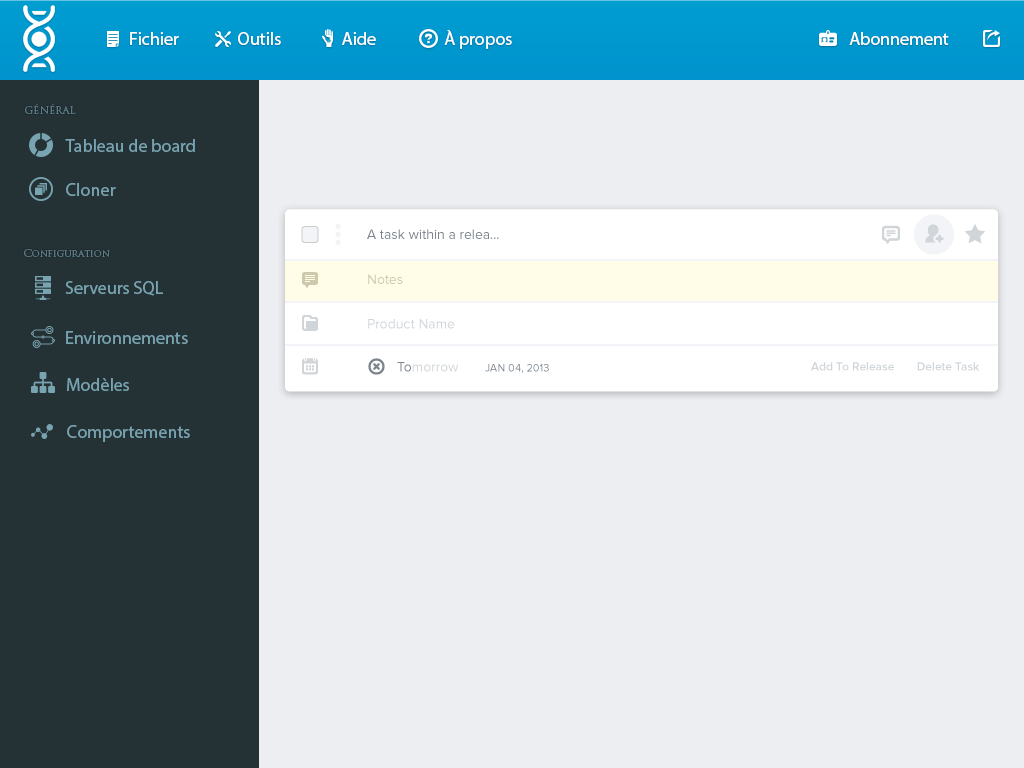
<style>
.page{position:relative;width:1024px;height:768px;background:#edeef1}
.page>*{position:absolute;margin:0}
.t1{font:18px "MyriadPro-Regular";color:#ffffff}
.t2{font:10px "TrajanPro-Regular";color:#5b7c86}
.t3{font:18px "MyriadPro-Regular";color:#78a3b0}
</style>
<div class="page">
<p class="t1" style="left:444px;top:30px;width:68px;height:19px">À propos</p>
<p class="t1" style="left:130px;top:32px;width:49px;height:13px">Fichier</p>
<p class="t1" style="left:238px;top:32px;width:43px;height:13px">Outils</p>
<p class="t1" style="left:342px;top:32px;width:34px;height:13px">Aide</p>
<p class="t1" style="left:849px;top:32px;width:100px;height:13px">Abonnement</p>
<p class="t2" style="left:25px;top:104px;width:51px;height:10px">GÉNÉRAL</p>
<p class="t3" style="left:65px;top:139px;width:130px;height:13px">Tableau de board</p>
<p class="t3" style="left:66px;top:183px;width:50px;height:13px">Cloner</p>
<p class="t2" style="left:24px;top:249px;width:86px;height:8px">Configuration</p>
<p class="t3" style="left:65px;top:281px;width:98px;height:15px">Serveurs SQL</p>
<p class="t3" style="left:66px;top:331px;width:122px;height:13px">Environnements</p>
<p class="t3" style="left:67px;top:378px;width:62px;height:13px">Modèles</p>
<p class="t3" style="left:67px;top:425px;width:123px;height:17px">Comportements</p>
</div>
